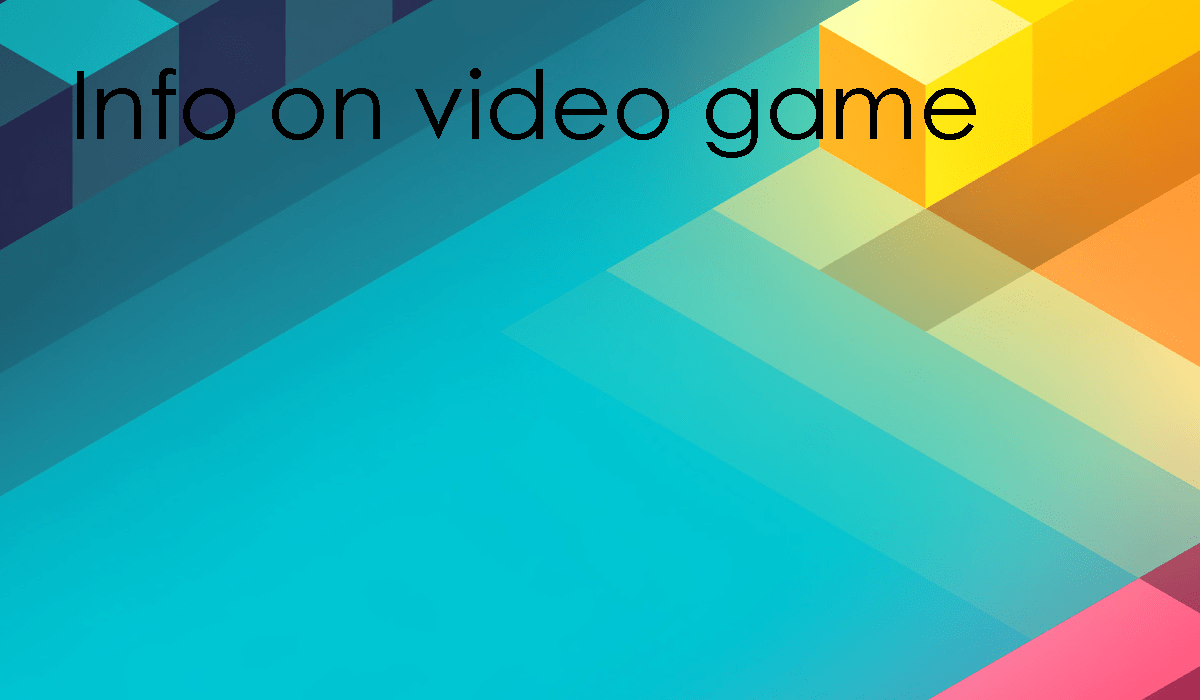
<style>
.page{position:relative;width:1200px;height:700px}
.page>*{position:absolute;margin:0}
.t1{font:95.1px "CenturyGothic";color:#000000}
</style>
<div class="page">
<p class="t1" style="left:77px;top:68px;width:899px;height:90px">Info on video game</p>
</div>
